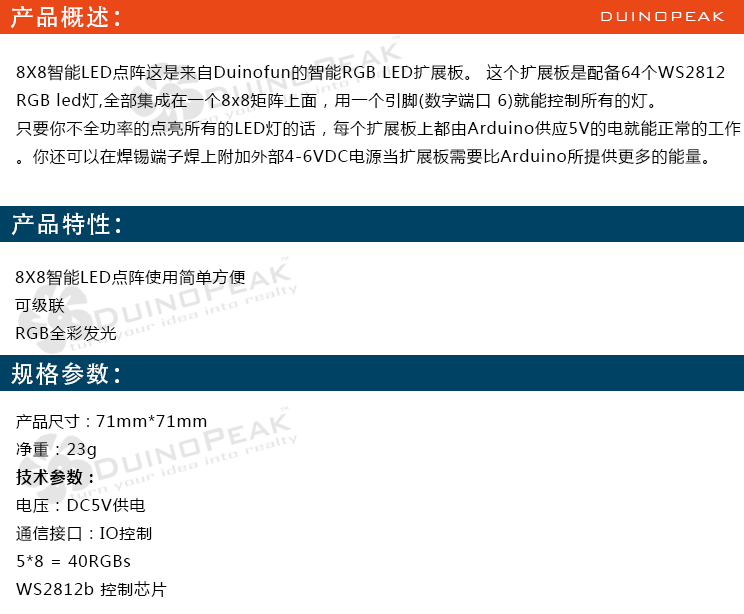
<style>
.page{position:relative;width:744px;height:614px;background:#ffffff}
.page>*{position:absolute;margin:0}
.t1{font:24px "AdobeHeitiStd-Regular";letter-spacing:0.05em;color:#ffffff}
.t2{font:18px "BankGothicBT-Light";letter-spacing:0.05em;color:#ffffff}
.t3{font:16px "MicrosoftYaHei";letter-spacing:0.05em;color:#000000}
.t4{font:16px "MicrosoftYaHei";color:#000000}
.t5{font:16px "MicrosoftYaHei-Bold";letter-spacing:0.05em;color:#000000}
</style>
<div class="page">
<p class="t1" style="left:10px;top:6px;width:109px;height:23px">产品概述：</p>
<p class="t2" style="left:601px;top:12px;width:124px;height:9px">DUINOPEAK</p>
<p class="t3" style="left:16px;top:64px;width:725px;height:101px">8X8智能LED点阵这是来自Duinofun的智能RGB LED扩展板。 这个扩展板是配备64个WS2812 <br>RGB led灯,全部集成在一个8x8矩阵上面，用一个引脚(数字端口 6)就能控制所有的灯。<br>只要你不全功率的点亮所有的LED灯的话，每个扩展板上都由Arduino供应5V的电就能正常的工作<br>。你还可以在焊锡端子焊上附加外部4-6VDC电源当扩展板需要比Arduino所提供更多的能量。</p>
<p class="t1" style="left:11px;top:212px;width:109px;height:24px">产品特性：</p>
<p class="t3" style="left:15px;top:269px;width:230px;height:72px">8X8智能LED点阵使用简单方便<br>可级联<br>RGB全彩发光</p>
<p class="t1" style="left:11px;top:362px;width:108px;height:23px">规格参数：</p>
<p class="t3" style="left:16px;top:414px;width:191px;height:183px"><span class="t4">产品尺寸：</span>71mm*71mm<br>净重：23g<br><span class="t5">技术参数：<br></span>电压：DC5V供电<br>通信接口：IO控制<br>5*8 = 40RGBs<br>WS2812b 控制芯片</p>
</div>
